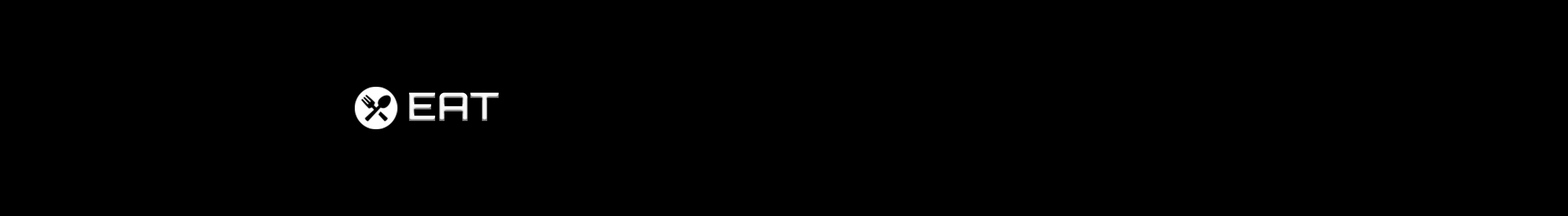
<style>
.page{position:relative;width:1568px;height:216px;background:#000000}
.page>*{position:absolute;margin:0}
.t1{font:39.2px "Orbitron-Bold"}
</style>
<div class="page">
<p class="t1" style="left:409px;top:93px;width:90px;height:28px">EAT</p>
</div>
